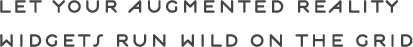
<style>
.page{position:relative;width:413px;height:47px;background:#ffffff}
.page>*{position:absolute;margin:0}
.t1{font:35px/34px "Estilo";color:#424542;font-weight:bold}
</style>
<div class="page">
<p class="t1" style="left:0px;top:0px;width:413px;height:47px">let your augmented reality<br>widgets run wild on the grid</p>
</div>
